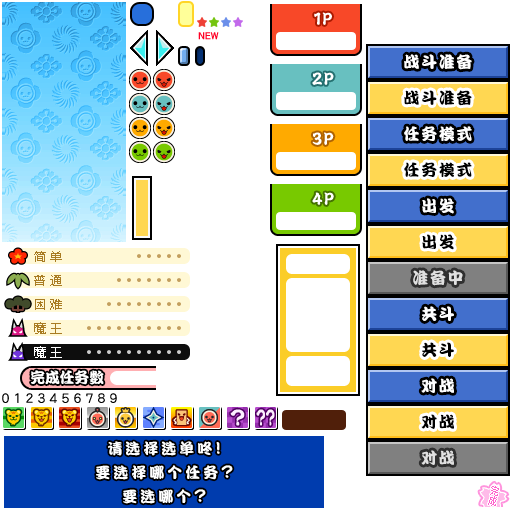
<style>
.page{position:relative;width:512px;height:512px;background:#ffffff}
.page>*{position:absolute;margin:0}
.t1{font:16px "DFPKanTingLiuW9";letter-spacing:0.1em;color:#ffffff}
.t2{font:16px "DFPKanTingLiuW9";letter-spacing:0.1em;color:#000000}
.t3{font:12px "MicrosoftYaHei";color:#a97c23}
.t4{font:16px "DFPKanTingLiuW9";letter-spacing:0.1em;color:#e0e0e0}
.t5{font:12px "MicrosoftYaHei";color:#ffffff}
.t6{font:15px "DFPKanTingLiuW9";letter-spacing:-0.02em;color:#ffffff}
.t7{font:15px "DFPKanTingLiuW9";letter-spacing:0.2em;color:#ffffff}
.t8{font:17px "DFPKanTingLiuW9";letter-spacing:0.2em;color:#ffffff}
.t9{font:18px "DFPKanTingLiuW9";letter-spacing:0.2em;color:#ffffff}
.t10{font:9.9px "MicrosoftYaHei";letter-spacing:0.1em;color:#ff63cd;scale:0.89 1}
</style>
<div class="page">
<p class="t1" style="left:404px;top:54px;width:68px;height:16px">战斗准备</p>
<p class="t2" style="left:404px;top:90px;width:68px;height:16px">战斗准备</p>
<p class="t1" style="left:404px;top:126px;width:68px;height:15px">任务模式</p>
<p class="t2" style="left:404px;top:162px;width:68px;height:15px">任务模式</p>
<p class="t1" style="left:422px;top:198px;width:32px;height:16px">出发</p>
<p class="t2" style="left:422px;top:234px;width:32px;height:16px">出发</p>
<p class="t3" style="left:34px;top:251px;width:28px;height:11px">简 单</p>
<p class="t4" style="left:413px;top:270px;width:50px;height:16px">准备中</p>
<p class="t3" style="left:34px;top:275px;width:28px;height:11px">普 通</p>
<p class="t3" style="left:35px;top:299px;width:27px;height:11px">困 难</p>
<p class="t1" style="left:422px;top:306px;width:32px;height:15px">共斗</p>
<p class="t3" style="left:34px;top:322px;width:28px;height:12px">魔 王</p>
<p class="t2" style="left:422px;top:342px;width:32px;height:15px">共斗</p>
<p class="t5" style="left:34px;top:346px;width:28px;height:12px">魔 王</p>
<p class="t6" style="left:31px;top:370px;width:73px;height:15px">完成任务数</p>
<p class="t1" style="left:421px;top:378px;width:33px;height:15px">对战</p>
<p class="t2" style="left:421px;top:414px;width:33px;height:15px">对战</p>
<p class="t7" style="left:108px;top:441px;width:112px;height:15px">请选择选单咚<span class="t8">!</span></p>
<p class="t4" style="left:421px;top:450px;width:33px;height:15px">对战</p>
<p class="t7" style="left:96px;top:465px;width:137px;height:15px">要选择哪个任务<span class="t9">?</span></p>
<p class="t10" style="left:488px;top:486px;width:11px;height:20px;rotate:17deg">完成</p>
<p class="t7" style="left:123px;top:489px;width:83px;height:15px">要选哪个<span class="t9">?</span></p>
</div>
